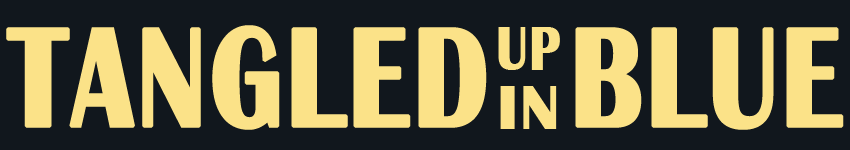
<style>
.page{position:relative;width:850px;height:150px;background:#11171d}
.page>*{position:absolute;margin:0}
.t1{font:145.8px "BritannicBold";letter-spacing:0.02em;color:#fbe288;font-weight:bold;scale:0.77 1}
.t2{font:62.5px "BritannicBold";letter-spacing:0.02em;color:#fbe288;font-weight:bold;scale:0.8 1}
.t3{font:62.5px "BritannicBold";letter-spacing:0.02em;color:#fbe288;font-weight:bold}
</style>
<div class="page">
<p class="t1" style="left:6px;top:25px;width:838px;height:105px">TANGLED  BLUE</p>
<p class="t2" style="left:498px;top:27px;width:62px;height:43px">UP</p>
<p class="t3" style="left:500px;top:86px;width:57px;height:43px">IN</p>
</div>
